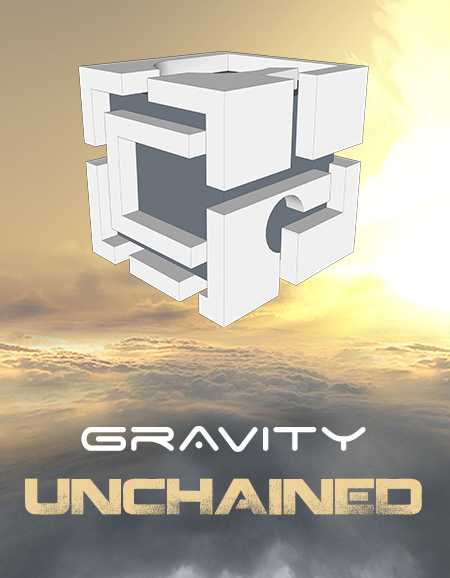
<style>
.page{position:relative;width:450px;height:578px}
.page>*{position:absolute;margin:0}
.t1{font:54.5px "SpaceAge";color:#fdfdfd}
.t2{font:49.9px "Coalition";color:#edd19a;text-transform:uppercase}
</style>
<div class="page">
<p class="t1" style="left:81px;top:426px;width:285px;height:26px">grAvity</p>
<p class="t2" style="left:25px;top:478px;width:397px;height:37px">unchained</p>
</div>
